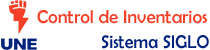
<style>
.page{position:relative;width:210px;height:50px;background:#ffffff}
.page>*{position:absolute;margin:0}
.t1{font:18.8px "BerlinSansFB-Reg";color:#f44029}
.t2{font:18.8px "BerlinSansFB-Reg";color:#00217c;scale:0.95 1}
</style>
<div class="page">
<p class="t1" style="left:37px;top:10px;width:170px;height:14px">Control de Inventarios</p>
<p class="t2" style="left:102px;top:35px;width:107px;height:14px">Sistema SIGLO</p>
</div>
